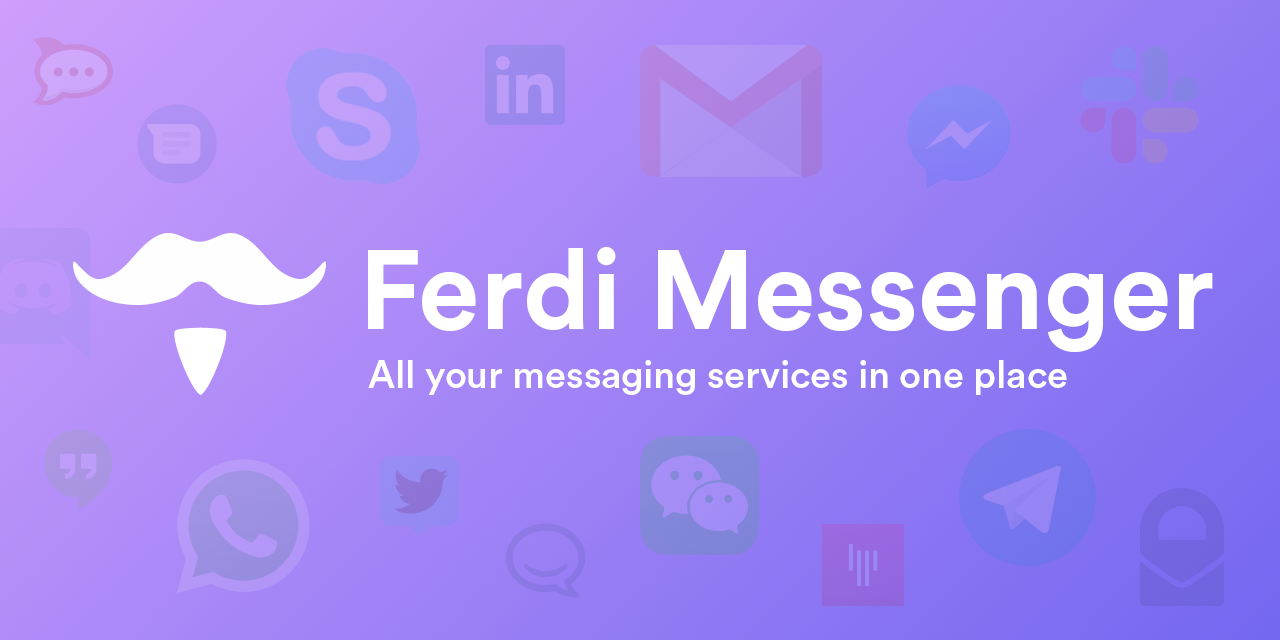
<style>
.page{position:relative;width:1280px;height:640px}
.page>*{position:absolute;margin:0}
.t1{font:111px "CircularStd-Bold";color:#ffffff}
.t2{font:38px "CircularStd-Medium";color:#ffffff}
</style>
<div class="page">
<p class="t1" style="left:368px;top:247px;width:845px;height:105px">Ferdi Messenger</p>
<p class="t2" style="left:368px;top:360px;width:699px;height:35px">All your messaging services in one place</p>
</div>
